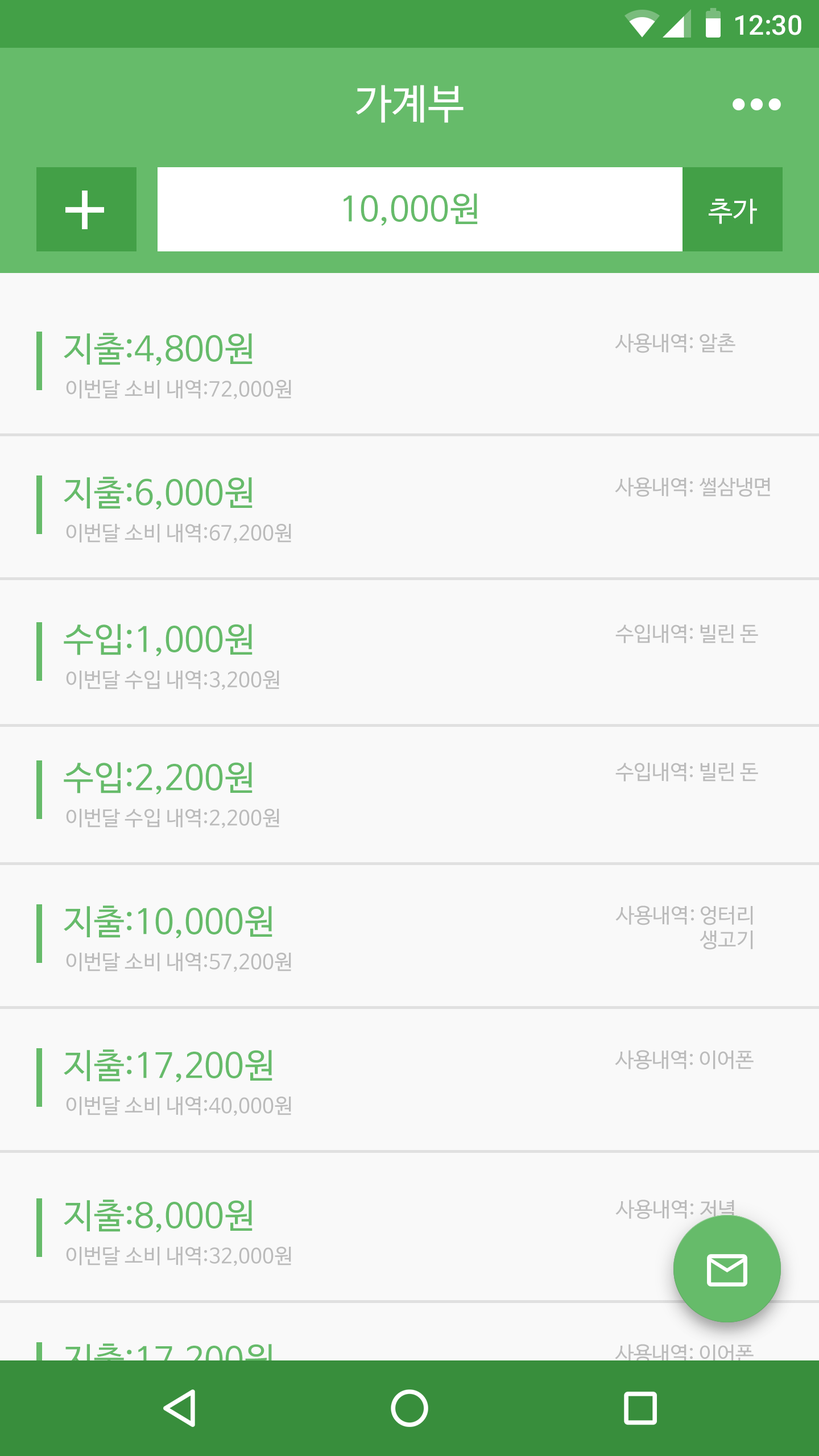
<style>
.page{position:relative;width:819px;height:1456px;background:#f9f9f9}
.page>*{position:absolute;margin:0}
.t1{font:27.3px "Roboto-Medium";color:#ffffff}
.t2{font:40.9px "NanumBarunGothic";color:#ffffff}
.t3{font:34.1px "NanumBarunGothic";color:#66bb6a}
.t4{font:27.3px "NanumBarunGothic";color:#ffffff}
.t5{font:20.5px "NanumBarunGothic";color:#bbbbbb}
</style>
<div class="page">
<p class="t1" style="left:735px;top:15px;width:66px;height:20px">12:30</p>
<p class="t2" style="left:355px;top:85px;width:109px;height:38px">가계부</p>
<p class="t3" style="left:344px;top:193px;width:134px;height:33px">10,000원</p>
<p class="t4" style="left:709px;top:198px;width:48px;height:26px">추가</p>
<p class="t3" style="left:64px;top:333px;width:189px;height:33px">지출:4,800원</p>
<p class="t5" style="left:615px;top:333px;width:120px;height:20px">사용내역: 알촌</p>
<p class="t5" style="left:66px;top:379px;width:225px;height:20px">이번달 소비 내역:72,000원</p>
<p class="t3" style="left:64px;top:477px;width:189px;height:33px">지출:6,000원</p>
<p class="t5" style="left:615px;top:477px;width:155px;height:20px">사용내역: 썰삼냉면</p>
<p class="t5" style="left:66px;top:523px;width:225px;height:20px">이번달 소비 내역:67,200원</p>
<p class="t3" style="left:64px;top:624px;width:189px;height:32px">수입:1,000원</p>
<p class="t5" style="left:615px;top:624px;width:143px;height:19px">수입내역: 빌린 돈</p>
<p class="t5" style="left:66px;top:670px;width:213px;height:20px">이번달 수입 내역:3,200원</p>
<p class="t3" style="left:64px;top:762px;width:189px;height:33px">수입:2,200원</p>
<p class="t5" style="left:615px;top:763px;width:143px;height:18px">수입내역: 빌린 돈</p>
<p class="t5" style="left:66px;top:808px;width:213px;height:20px">이번달 수입 내역:2,200원</p>
<p class="t3" style="left:64px;top:905px;width:208px;height:33px">지출:10,000원</p>
<p class="t5" style="left:615px;top:905px;width:138px;height:45px;text-align:right">사용내역: 엉터리<br>생고기</p>
<p class="t5" style="left:66px;top:952px;width:225px;height:20px">이번달 소비 내역:57,200원</p>
<p class="t3" style="left:64px;top:1049px;width:208px;height:33px">지출:17,200원</p>
<p class="t5" style="left:615px;top:1050px;width:139px;height:20px">사용내역: 이어폰</p>
<p class="t5" style="left:66px;top:1096px;width:225px;height:20px">이번달 소비 내역:40,000원</p>
<p class="t3" style="left:64px;top:1199px;width:189px;height:33px">지출:8,000원</p>
<p class="t5" style="left:615px;top:1199px;width:138px;height:45px;text-align:right">사용내역: 저녁    <br>생고기</p>
<p class="t5" style="left:66px;top:1246px;width:225px;height:20px">이번달 소비 내역:32,000원</p>
<p class="t5" style="left:615px;top:1344px;width:139px;height:20px">사용내역: 이어폰</p>
</div>
